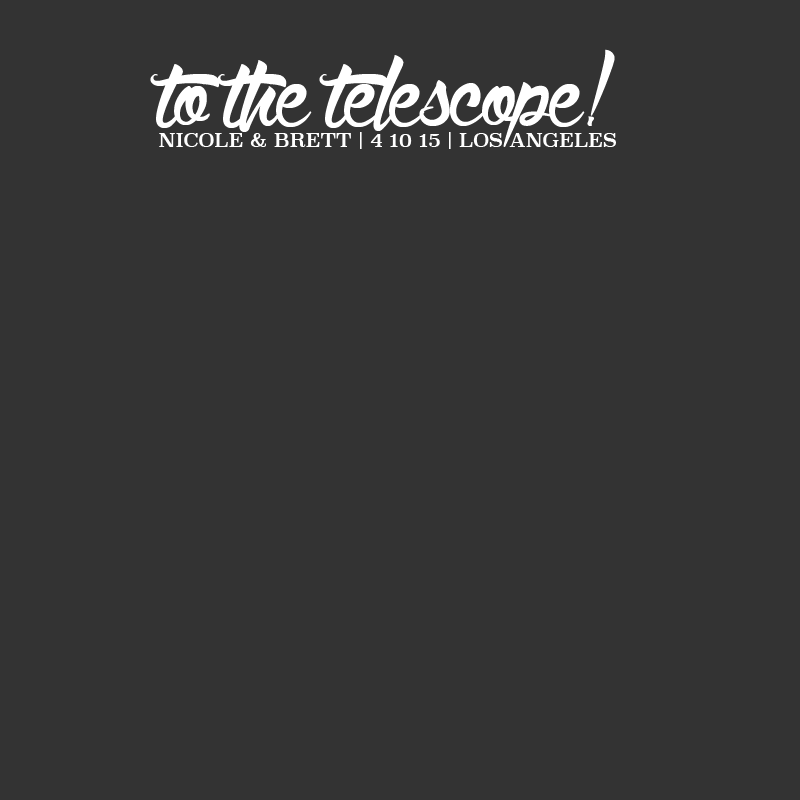
<style>
.page{position:relative;width:800px;height:800px;background:#333333}
.page>*{position:absolute;margin:0}
.t1{font:19px "Superclarendon-Regular";color:#ffffff}
.t2{font:150px "WolfintheCity";color:#ffffff}
</style>
<div class="page">
<p class="t1" style="left:150px;top:49px;width:466px;height:100px"><span class="t2">to the telescope!<br></span>NICOLE &amp; BRETT | 4 10 15 | LOS ANGELES</p>
</div>
